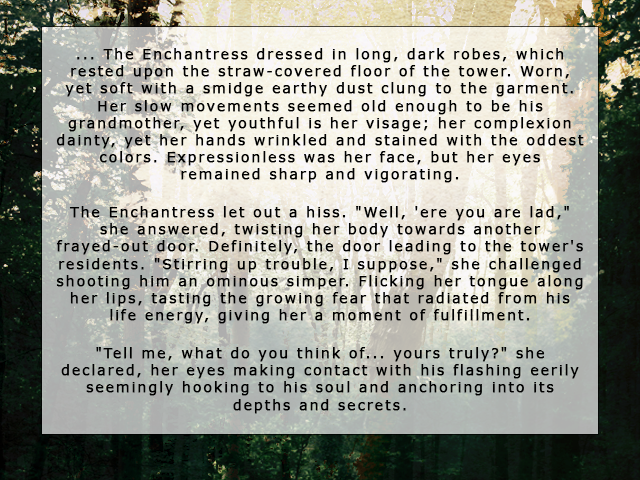
<style>
.page{position:relative;width:640px;height:480px}
.page>*{position:absolute;margin:0}
.t1{font:14.3px "Verdana";letter-spacing:0.1em;color:#000000;font-weight:bold}
</style>
<div class="page">
<p class="t1" style="left:56px;top:48px;width:528px;height:366px;text-align:center">... The Enchantress dressed in long, dark robes, which rested upon the straw-covered floor of the tower. Worn, yet soft with a smidge earthy dust clung to the garment. Her slow movements seemed old enough to be his grandmother, yet youthful is her visage; her complexion dainty, yet her hands wrinkled and stained with the oddest colors. Expressionless was her face, but her eyes remained sharp and vigorating. <br><br>The Enchantress let out a hiss. "Well, 'ere you are lad," she answered, twisting her body towards another frayed-out door. Definitely, the door leading to the tower's residents. "Stirring up trouble, I suppose," she challenged shooting him an ominous simper. Flicking her tongue along her lips, tasting the growing fear that radiated from his life energy, giving her a moment of fulfillment.<br><br>"Tell me, what do you think of... yours truly?" she declared, her eyes making contact with his flashing eerily seemingly hooking to his soul and anchoring into its depths and secrets.</p>
</div>
